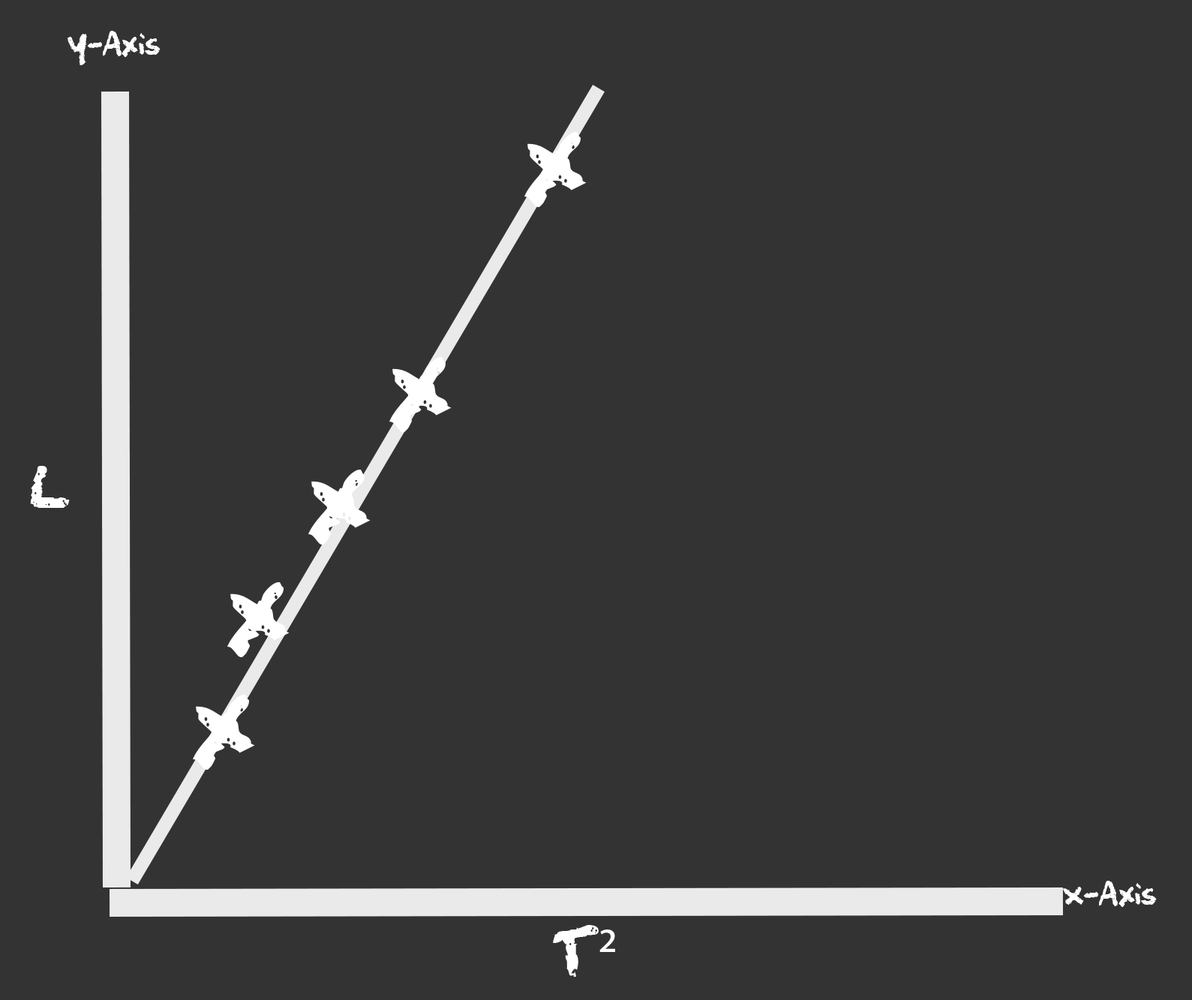
<style>
.page{position:relative;width:1192px;height:1000px;background:#333333}
.page>*{position:absolute;margin:0}
.t1{font:25px "squeakychalksound";color:#ffffff}
.t2{font:93.8px "squeakychalksound";color:#ffffff}
.t3{font:93.8px "MyriadPro-Regular";color:#ffffff}
.t4{font:56.3px "squeakychalksound";color:#ffffff}
.t5{font:56.3px "MyriadPro-Regular";color:#ffffff}
</style>
<div class="page">
<p class="t1" style="left:68px;top:31px;width:93px;height:34px">Y-Axis</p>
<p class="t2" style="left:193px;top:132px;width:394px;height:638px"><span class="t3">              </span>x<br><br>         x<br>      x  <br>   x  <br> x</p>
<p class="t4" style="left:30px;top:466px;width:40px;height:42px">L</p>
<p class="t1" style="left:1062px;top:881px;width:95px;height:26px">X-Axis</p>
<p class="t4" style="left:553px;top:925px;width:62px;height:52px">T<span class="t5">²</span>²</p>
</div>
